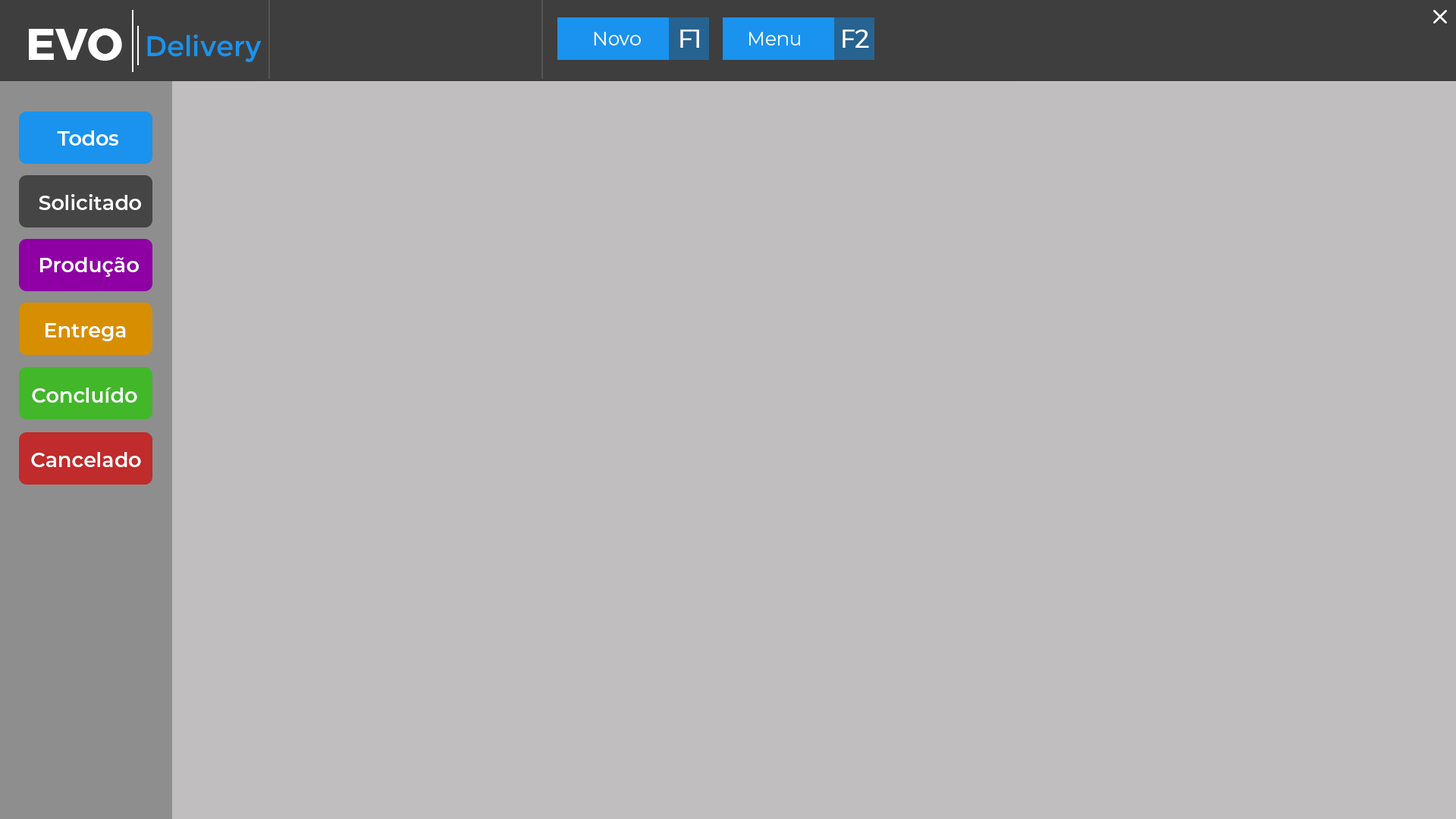
<style>
.page{position:relative;width:1456px;height:819px;background:#c0bebe}
.page>*{position:absolute;margin:0}
.t1{font:44.2px "Montserrat-Bold";color:#ffffff}
.t2{font:25.3px "Montserrat-Regular";color:#ffffff}
.t3{font:28.4px "Montserrat-Regular";color:#1993ee}
.t4{font:19px "Montserrat-Regular";color:#ffffff}
.t5{font:20.3px "Montserrat-SemiBold";color:#ffffff}
</style>
<div class="page">
<p class="t1" style="left:29px;top:28px;width:93px;height:33px">EVO</p>
<p class="t2" style="left:680px;top:30px;width:19px;height:18px">F1</p>
<p class="t2" style="left:842px;top:30px;width:27px;height:18px">F2</p>
<p class="t3" style="left:147px;top:34px;width:115px;height:28px">Delivery</p>
<p class="t4" style="left:594px;top:32px;width:47px;height:13px">Novo</p>
<p class="t4" style="left:749px;top:32px;width:51px;height:13px">Menu</p>
<p class="t5" style="left:57px;top:130px;width:61px;height:16px">Todos</p>
<p class="t5" style="left:39px;top:194px;width:102px;height:16px">Solicitado</p>
<p class="t5" style="left:40px;top:257px;width:99px;height:20px">Produção</p>
<p class="t5" style="left:45px;top:323px;width:81px;height:18px">Entrega</p>
<p class="t5" style="left:32px;top:387px;width:105px;height:16px">Concluído</p>
<p class="t5" style="left:31px;top:452px;width:110px;height:15px">Cancelado</p>
</div>
